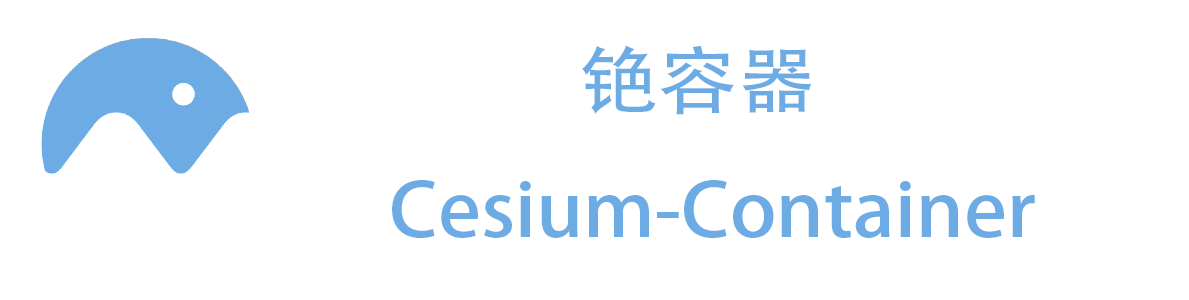
<style>
.page{position:relative;width:1189px;height:300px;background:#ffffff}
.page>*{position:absolute;margin:0}
.t1{font:59px "AdobeHeitiStd-Regular";color:#6dabe4;scale:1.07 1}
</style>
<div class="page">
<p class="t1" style="left:392px;top:45px;width:643px;height:193px">铯容器<br>Cesium-Container</p>
</div>
